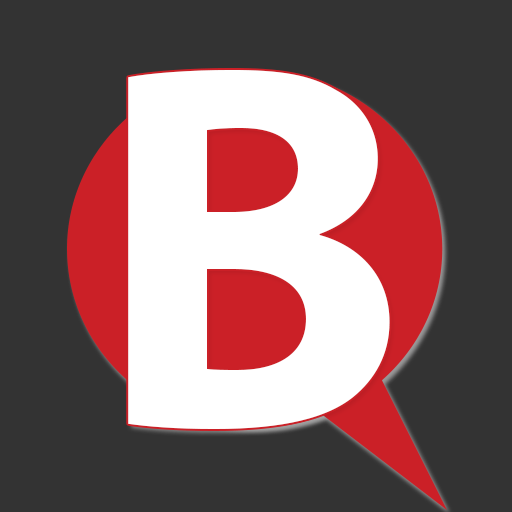
<style>
.page{position:relative;width:512px;height:512px;background:#333333}
.page>*{position:absolute;margin:0}
.t1{font:522px "MyriadPro-Bold";color:#ffffff}
</style>
<div class="page">
<p class="t1" style="left:128px;top:70px;width:262px;height:359px">B</p>
</div>
